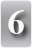
<style>
.page{position:relative;width:32px;height:48px}
.page>*{position:absolute;margin:0}
.t1{font:36px "TimesNewRomanPS-BoldMT";color:#f8f8f4}
</style>
<div class="page">
<p class="t1" style="left:8px;top:10px;width:16px;height:24px">6</p>
</div>
